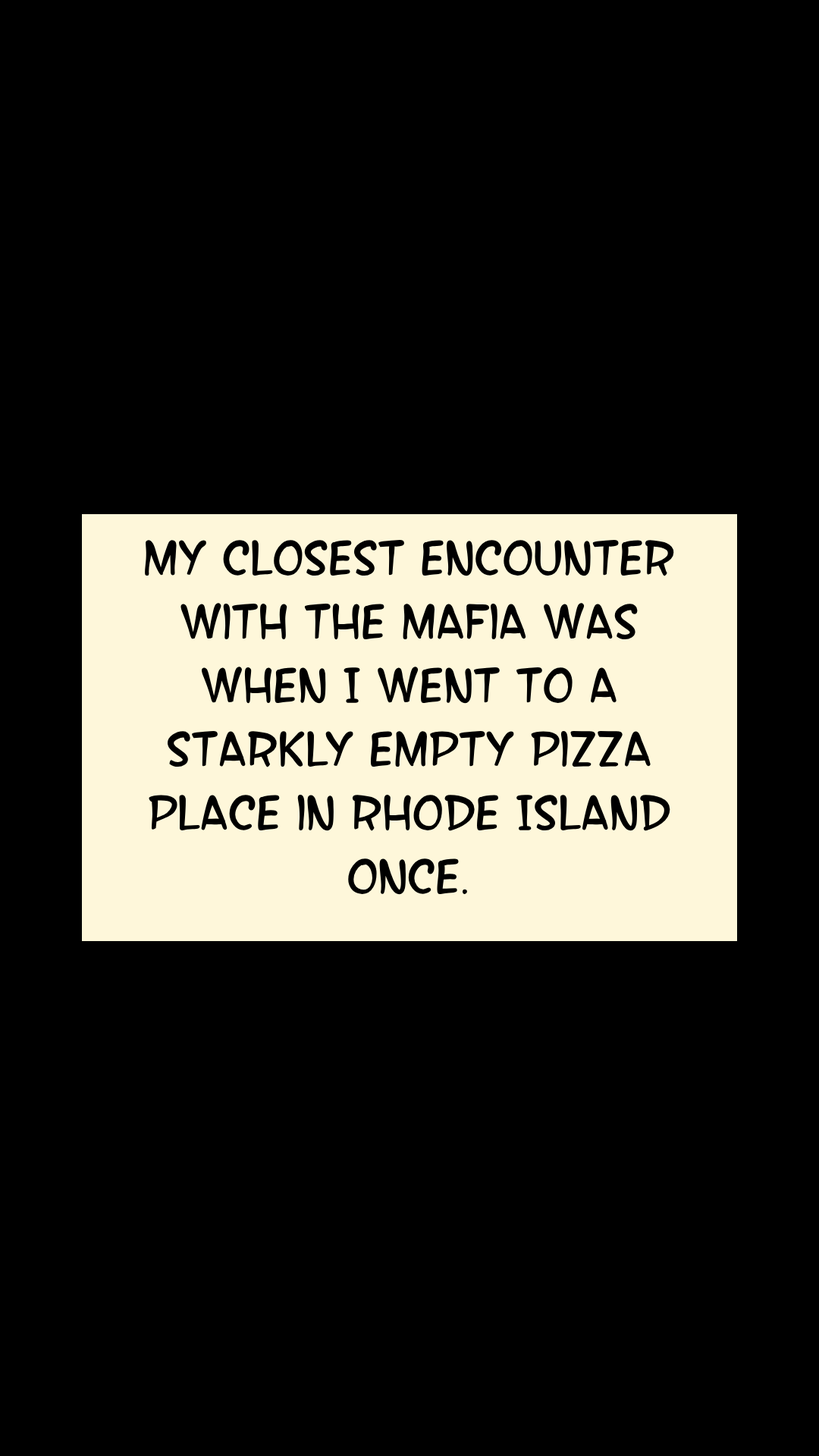
<style>
.page{position:relative;width:819px;height:1456px;background:#000000}
.page>*{position:absolute;margin:0}
.t1{font:53.1px "SFWonderComic";color:#000000}
</style>
<div class="page">
<p class="t1" style="left:145px;top:540px;width:529px;height:355px;text-align:center">My closest encounter with the mafia was when I went to a starkly empty pizza place in Rhode Island once.</p>
</div>
